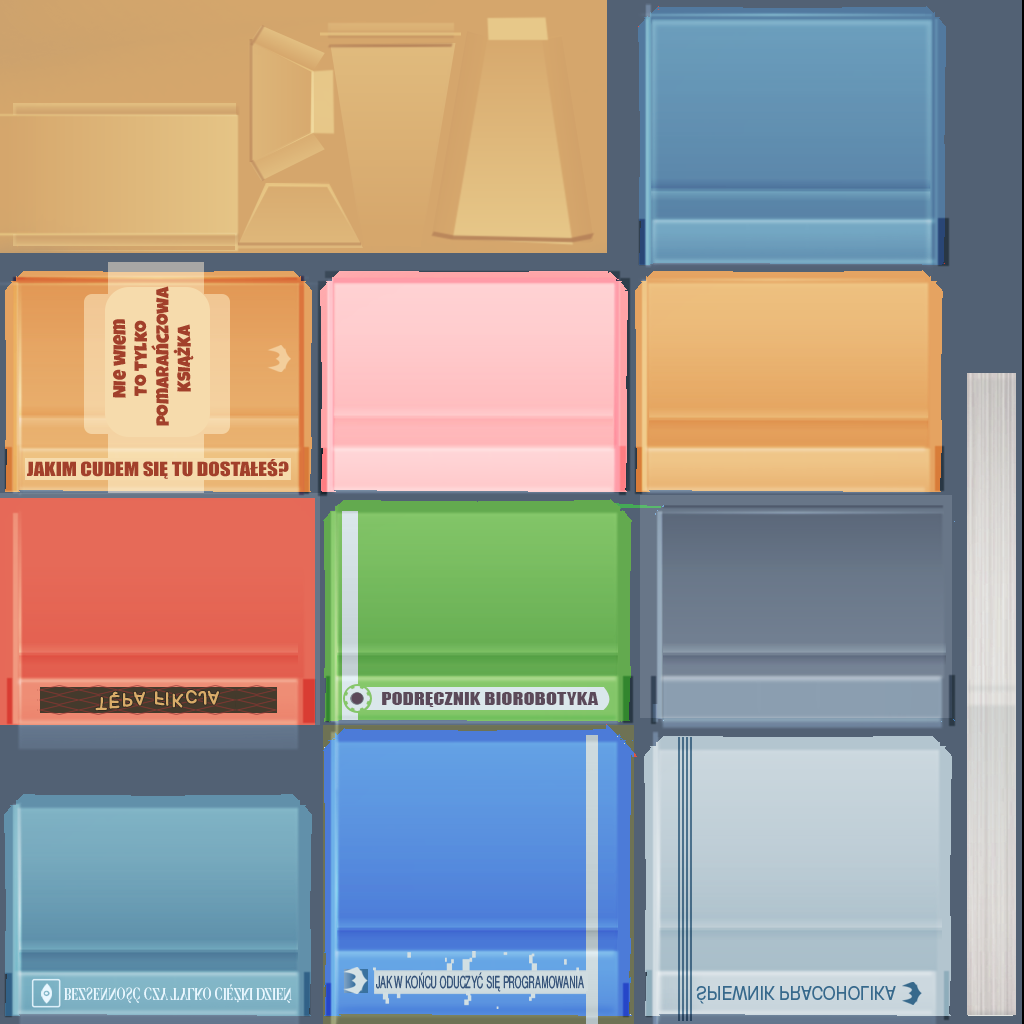
<style>
.page{position:relative;width:1024px;height:1024px}
.page>*{position:absolute;margin:0}
.t1{font:18px "LuckiestGuy-Regular";color:#a2402b}
.t2{font:18px "Impact";color:#a2402b;scale:1.17 1}
.t3{font:18px "ComicHelvetic-Medium";color:#d9ac69}
.t4{font:16px "Impact";color:#5b4959;scale:1.27 1}
.t5{font:16.4px "NimbusSanL-Reg";color:#37547a;scale:0.54 1}
.t6{font:16.1px "MonomakhUnicode";letter-spacing:-0.025em;color:#e9f7ff;scale:0.74 1}
.t7{font:18px "NimbusSanL-Reg";color:#37698c;scale:0.9 1}
</style>
<div class="page">
<p class="t1" style="left:113px;top:286px;width:81px;height:140px;text-align:center;rotate:-90deg">Nie wiem<br>To tylko<br> pomarańczowa<br>KSIĄŻKA</p>
<p class="t2" style="left:27px;top:459px;width:262px;height:20px">JAKIM CUDEM SIĘ TU DOSTAŁEŚ?</p>
<p class="t3" style="left:95px;top:697px;width:12px;height:14px">T</p>
<p class="t3" style="left:109px;top:691px;width:11px;height:18px">Ę</p>
<p class="t3" style="left:123px;top:693px;width:10px;height:14px">P</p>
<p class="t3" style="left:133px;top:691px;width:12px;height:15px">A</p>
<p class="t3" style="left:155px;top:691px;width:14px;height:15px;rotate:8deg">FI</p>
<p class="t3" style="left:172px;top:693px;width:12px;height:15px">K</p>
<p class="t3" style="left:186px;top:690px;width:33px;height:15px;rotate:3deg">CJA</p>
<p class="t4" style="left:382px;top:692px;width:217px;height:15px">PODRĘCZNIK BIOROBOTYKA</p>
<p class="t5" style="left:376px;top:972px;width:208px;height:20px">JAK W KOŃCU ODUCZYĆ SIĘ PROGRAMOWANIA</p>
<p class="t6" style="left:64px;top:984px;width:228px;height:19px">BEZSENNOŚĆ CZY TYLKO CIĘŻKI DZIEŃ</p>
<p class="t7" style="left:696px;top:986px;width:200px;height:18px">ŚPIEWNIK PRACOHOLIKA</p>
</div>
